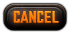
<style>
.page{position:relative;width:70px;height:34px;background:#ffffff}
.page>*{position:absolute;margin:0}
.t1{font:17px "CaliforniaGothic-Regular"}
</style>
<div class="page">
<p class="t1" style="left:13px;top:11px;width:46px;height:12px">CANCEL</p>
</div>
